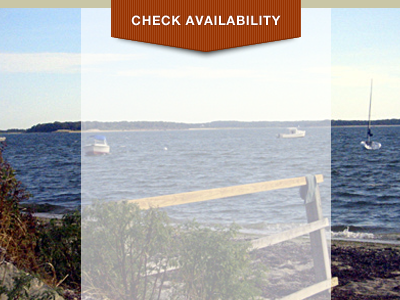
<style>
.page{position:relative;width:400px;height:300px}
.page>*{position:absolute;margin:0}
.t1{font:13px "HelveticaNeue-Bold";letter-spacing:0.05em;color:#ffffff;text-transform:uppercase}
</style>
<div class="page">
<p class="t1" style="left:131px;top:15px;width:150px;height:11px">Check Availability</p>
</div>
